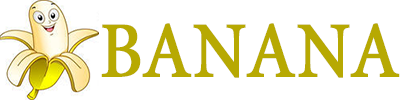
<style>
.page{position:relative;width:400px;height:100px;background:#ffffff}
.page>*{position:absolute;margin:0}
.t1{font:79.4px "MinionPro-Regular";color:#b7a902;font-weight:bold;scale:0.9 1}
</style>
<div class="page">
<p class="t1" style="left:101px;top:23px;width:299px;height:55px">BANANA</p>
</div>
